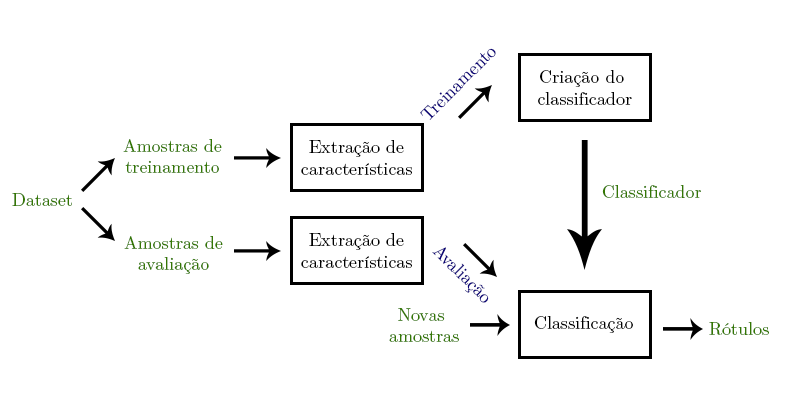
<style>
.page{position:relative;width:800px;height:400px;background:#ffffff}
.page>*{position:absolute;margin:0}
.t1{font:18px "CMUSerif-Roman";color:#0b0377}
.t2{font:18px "CMUSerif-Roman";color:#000000}
.t3{font:18px "CMUSerif-Roman";color:#347703}
</style>
<div class="page">
<p class="t1" style="left:420px;top:48px;width:76px;height:72px;rotate:-45deg">Treinamento</p>
<p class="t2" style="left:538px;top:70px;width:94px;height:35px;text-align:center">Criação do <br>classificador</p>
<p class="t3" style="left:123px;top:139px;width:99px;height:34px;text-align:center">Amostras de<br>treinamento</p>
<p class="t2" style="left:301px;top:140px;width:111px;height:35px;text-align:center">Extração de<br>características</p>
<p class="t3" style="left:602px;top:185px;width:99px;height:13px">Classificador</p>
<p class="t3" style="left:12px;top:193px;width:60px;height:13px">Dataset</p>
<p class="t2" style="left:301px;top:233px;width:111px;height:35px;text-align:center">Extração de<br>características</p>
<p class="t3" style="left:124px;top:236px;width:99px;height:38px;text-align:center">Amostras de<br>avaliação</p>
<p class="t1" style="left:432px;top:247px;width:57px;height:56px;rotate:45deg">Avaliação</p>
<p class="t3" style="left:389px;top:308px;width:70px;height:34px;text-align:center">Novas <br>amostras</p>
<p class="t2" style="left:534px;top:316px;width:99px;height:17px">Classificação</p>
<p class="t3" style="left:709px;top:322px;width:60px;height:13px">Rótulos</p>
</div>
